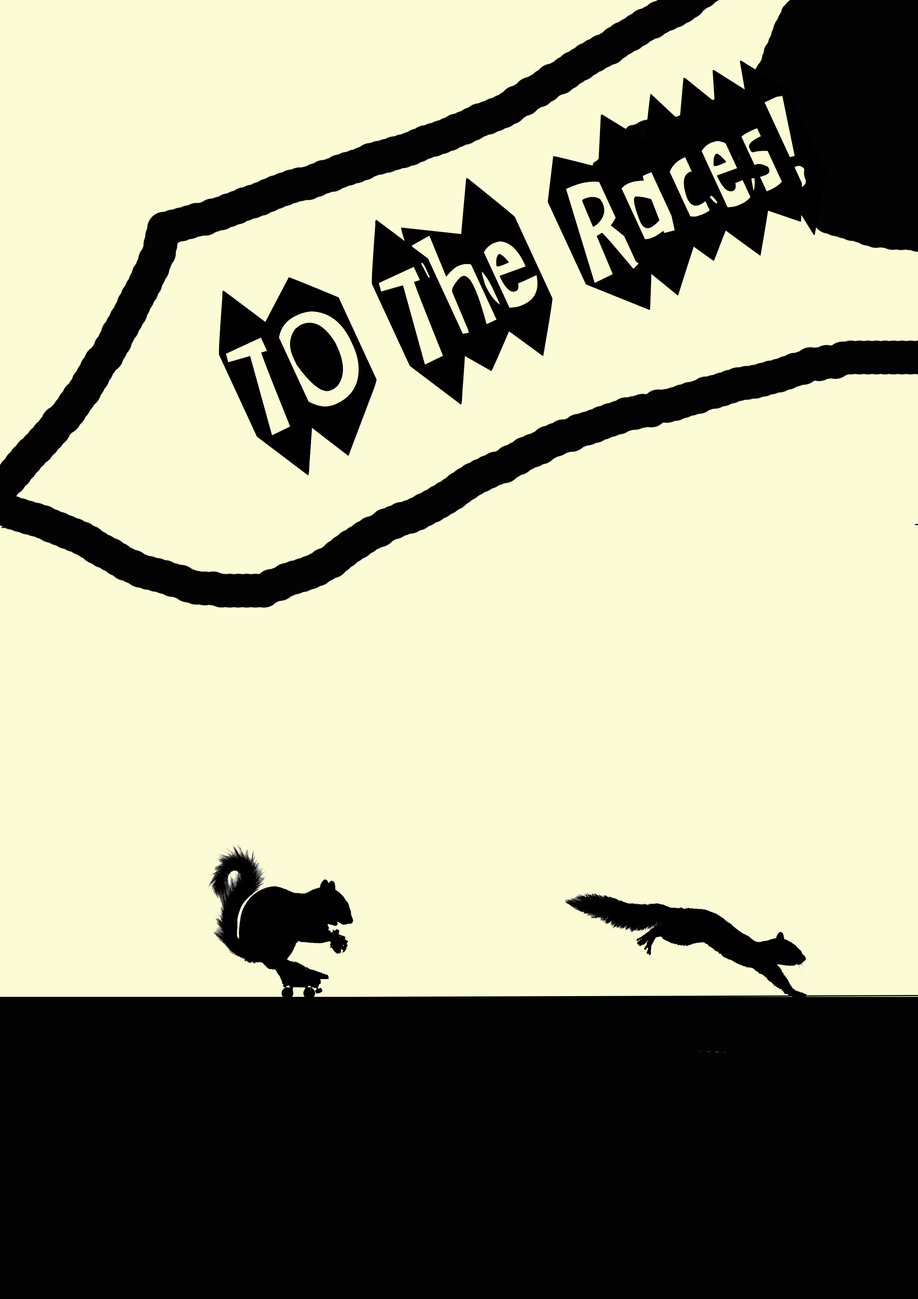
<style>
.page{position:relative;width:918px;height:1299px;background:#fbfbd5}
.page>*{position:absolute;margin:0}
.t1{font:200.7px "KA-BLAMO!";letter-spacing:-0.06em;color:#000000;scale:1.22 1}
</style>
<div class="page">
<p class="t1" style="left:219px;top:60px;width:607px;height:415px;rotate:-25deg">TO The Races!</p>
</div>
